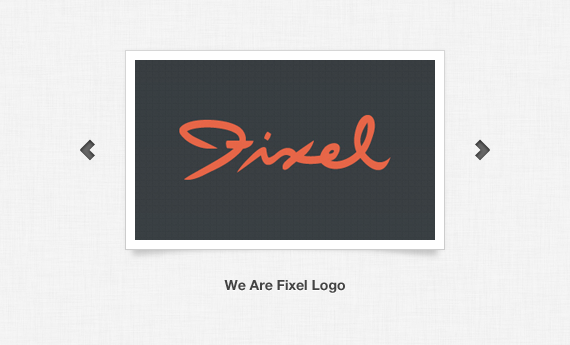
<style>
.page{position:relative;width:570px;height:345px}
.page>*{position:absolute;margin:0}
.t1{font:14px "HelveticaNeue-Bold";color:#444444}
</style>
<div class="page">
<p class="t1" style="left:224px;top:280px;width:121px;height:13px">We Are Fixel Logo</p>
</div>
